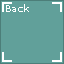
<style>
.page{position:relative;width:64px;height:64px;background:#61a09a}
.page>*{position:absolute;margin:0}
.t1{font:10px "SourceCodePro-Regular";color:#ffffff}
</style>
<div class="page">
<p class="t1" style="left:6px;top:4px;width:23px;height:8px">Back</p>
</div>
